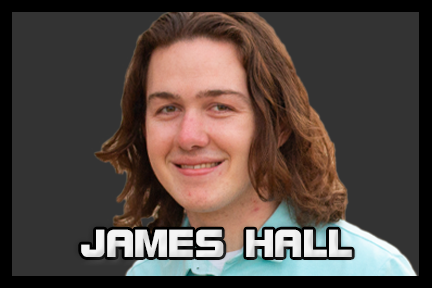
<style>
.page{position:relative;width:432px;height:288px;background:#333333}
.page>*{position:absolute;margin:0}
.t1{font:41.7px "BolsterBold";color:#f3f3f3}
</style>
<div class="page">
<p class="t1" style="left:81px;top:229px;width:271px;height:28px">JAMES HALL</p>
</div>
